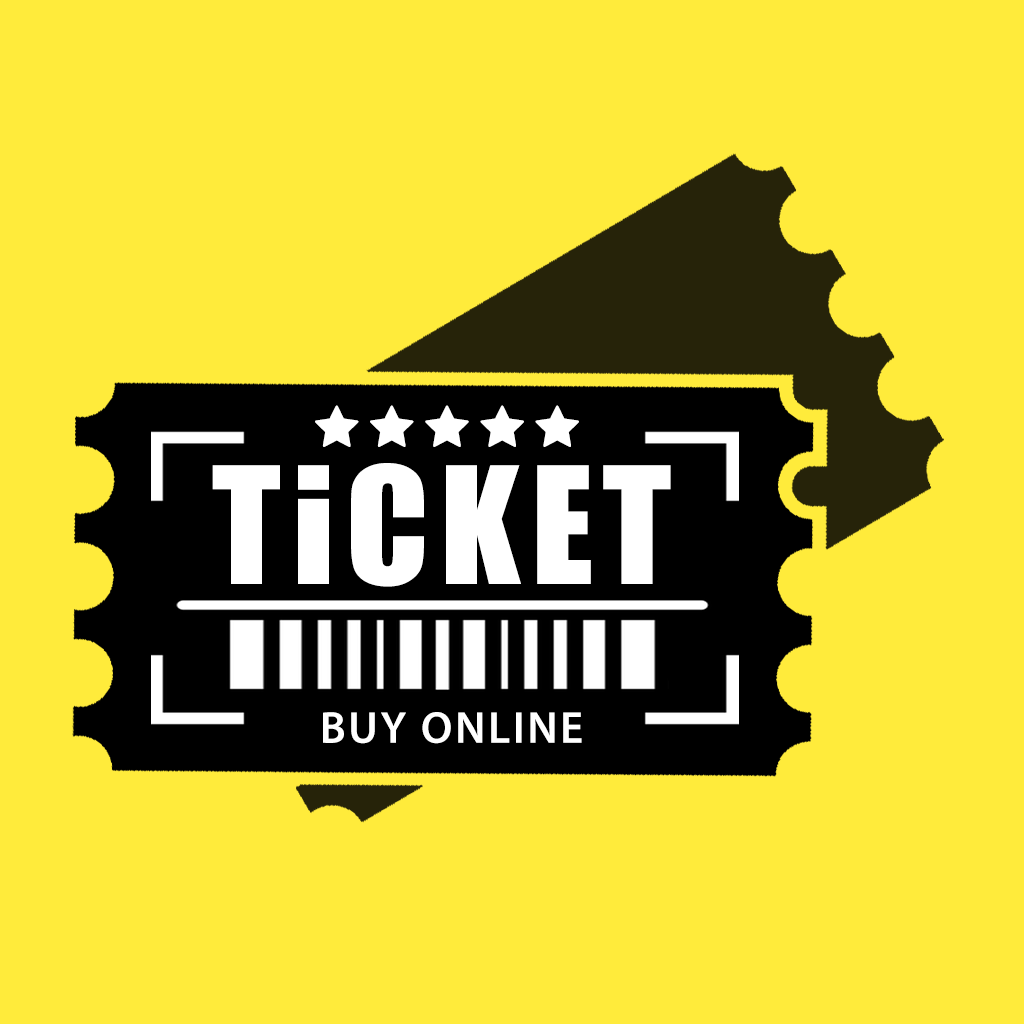
<style>
.page{position:relative;width:1024px;height:1024px;background:#ffeb3b}
.page>*{position:absolute;margin:0}
.t1{font:149.7px "Impact";letter-spacing:0.073em;color:#ffffff}
.t2{font:45px "MyriadPro-Semibold";letter-spacing:0.056em;color:#ffffff;text-transform:uppercase}
</style>
<div class="page">
<p class="t1" style="left:212px;top:463px;width:459px;height:124px">TICKET</p>
<p class="t2" style="left:323px;top:712px;width:259px;height:32px">buy online</p>
</div>
